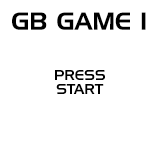
<style>
.page{position:relative;width:160px;height:144px;background:#ffffff}
.page>*{position:absolute;margin:0}
.t1{font:24px "HandelGothicBT-Regular";color:#000000}
.t2{font:14px/14px "HandelGothicBT-Regular";color:#000000}
</style>
<div class="page">
<p class="t1" style="left:12px;top:12px;width:134px;height:18px">GB GAME 1</p>
<p class="t2" style="left:55px;top:70px;width:50px;height:24px;text-align:center">PRESS<br>START</p>
</div>
